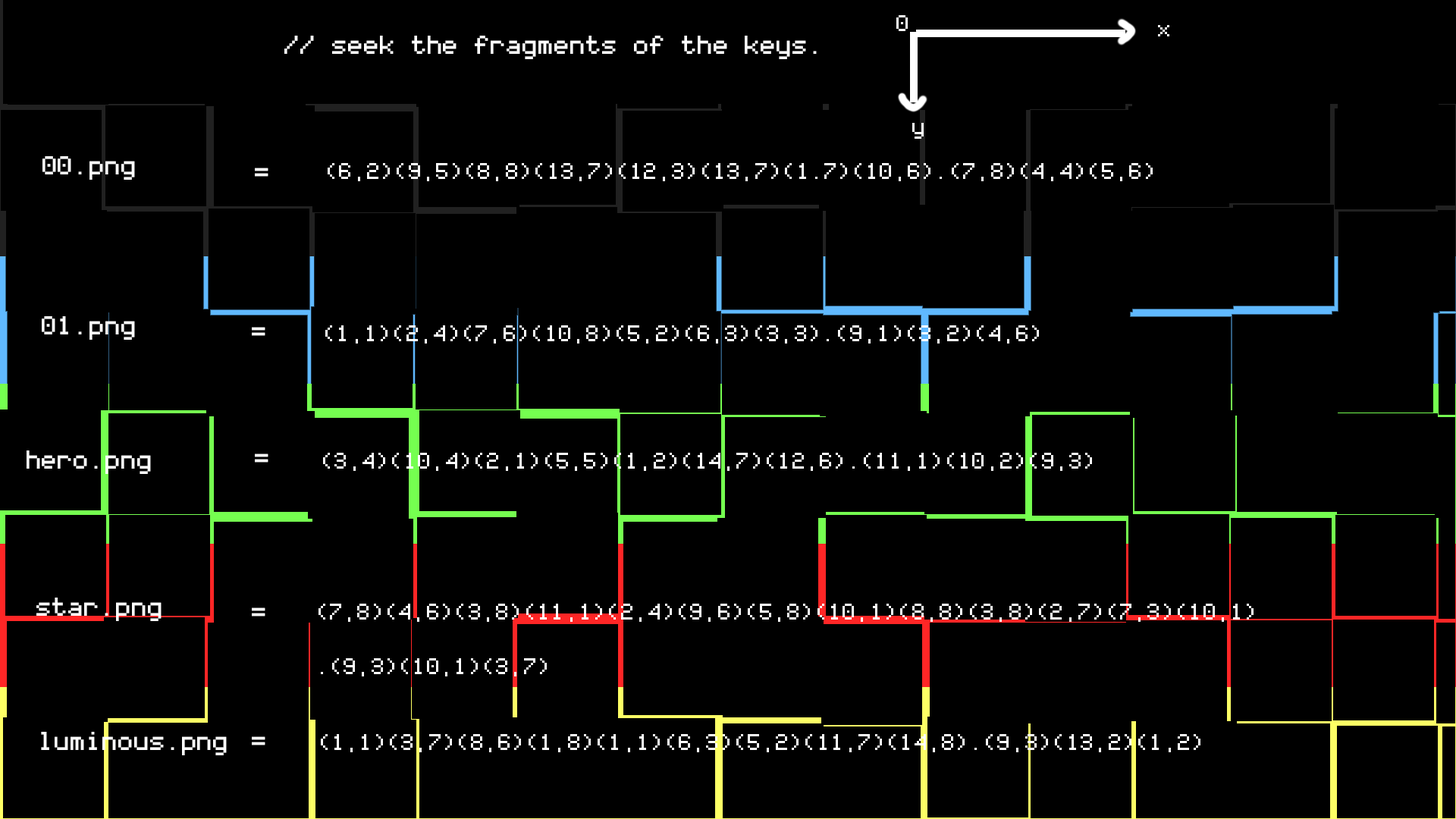
<style>
.page{position:relative;width:1456px;height:819px;background:#000000}
.page>*{position:absolute;margin:0}
.t1{font:36.4px "Coder's-Crux";color:#ffffff}
.t2{font:41.7px "Coder's-Crux";color:#ffffff}
.t3{font:36.4px/54.6px "Coder's-Crux";color:#ffffff}
</style>
<div class="page">
<p class="t1" style="left:896px;top:15px;width:12px;height:16px">0</p>
<p class="t1" style="left:1158px;top:25px;width:11px;height:11px">x</p>
<p class="t2" style="left:284px;top:36px;width:533px;height:23px">// seek the fragments of the keys.</p>
<p class="t1" style="left:912px;top:123px;width:12px;height:16px">y</p>
<p class="t2" style="left:42px;top:156px;width:93px;height:24px">00.png</p>
<p class="t2" style="left:255px;top:168px;width:13px;height:9px">=</p>
<p class="t1" style="left:328px;top:163px;width:825px;height:18px">(6,2)(9,5)(8,8)(13,7)(12,3)(13,7)(1.7)(10,6).(7,8)(4,4)(5,6)</p>
<p class="t2" style="left:42px;top:316px;width:93px;height:24px">01.png</p>
<p class="t2" style="left:252px;top:327px;width:13px;height:9px">=</p>
<p class="t1" style="left:325px;top:325px;width:714px;height:19px">(1,1)(2,4)(7,6)(10,8)(5,2)(6,3)(3,3).(9,1)(3,2)(4,6)</p>
<p class="t2" style="left:27px;top:450px;width:124px;height:24px">hero.png</p>
<p class="t2" style="left:255px;top:453px;width:13px;height:10px">=</p>
<p class="t1" style="left:323px;top:453px;width:769px;height:18px">(3,4)(10,4)(2,1)(5,5)(1,2)(14,7)(12,6).(11,1)(10,2)(9,3)</p>
<p class="t2" style="left:36px;top:598px;width:126px;height:23px">star.png</p>
<p class="t3" style="left:318px;top:604px;width:936px;height:72px">(7,8)(4,6)(3,8)(11,1)(2,4)(9,6)(5,8)(10,1)(8,8)(3,8)(2,7)(7,3)(10,1)<br>.(9,3)(10,1)(3,7)</p>
<p class="t2" style="left:252px;top:607px;width:13px;height:10px">=</p>
<p class="t2" style="left:41px;top:732px;width:186px;height:23px">luminous.png</p>
<p class="t2" style="left:252px;top:736px;width:13px;height:9px">=</p>
<p class="t1" style="left:321px;top:734px;width:879px;height:18px">(1,1)(3,7)(8,6)(1,8)(1,1)(6,3)(5,2)(11,7)(14,8).(9,3)(13,2)(1,2)</p>
</div>
